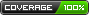
<style>
.page{position:relative;width:89px;height:15px}
.page>*{position:absolute;margin:0}
.t1{font:10.4px "VisitorTT1BRK";letter-spacing:-0.02em;color:#ffffff}
</style>
<div class="page">
<p class="t1" style="left:5px;top:5px;width:47px;height:5px">COVERAGE</p>
<p class="t1" style="left:64px;top:5px;width:20px;height:5px">100%</p>
</div>
